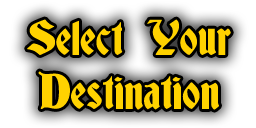
<style>
.page{position:relative;width:256px;height:128px}
.page>*{position:absolute;margin:0}
.t1{font:45px "Deutsch-Gothic";color:#ffd200}
</style>
<div class="page">
<p class="t1" style="left:27px;top:19px;width:204px;height:91px;text-align:center">Select Your<br>Destination</p>
</div>
